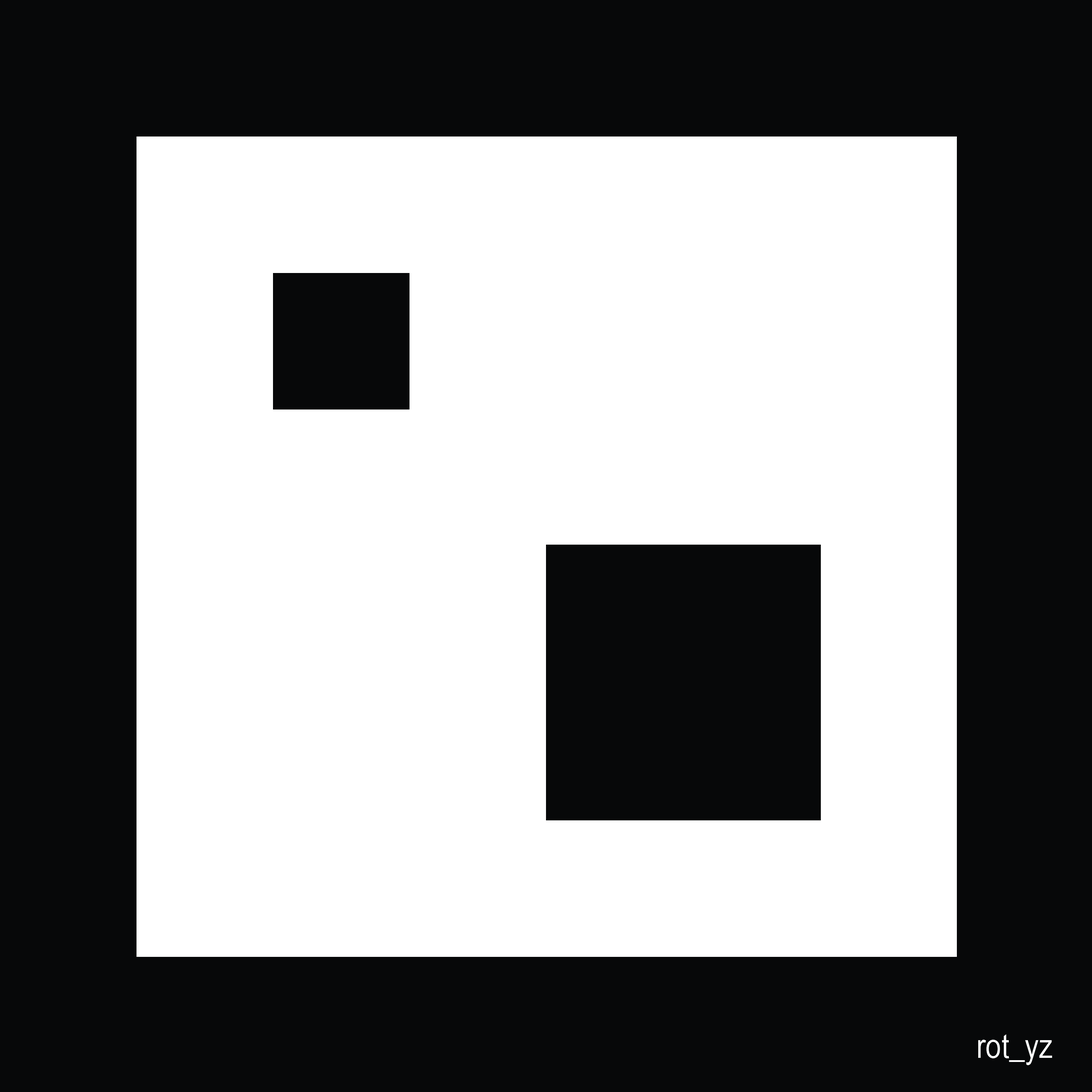
<style>
.page{position:relative;width:1092px;height:1092px;background:#070809}
.page>*{position:absolute;margin:0}
.t1{font:34.1px "ArialNarrow";color:#ffffff}
</style>
<div class="page">
<p class="t1" style="left:978px;top:1034px;width:74px;height:31px">rot_yz</p>
</div>
